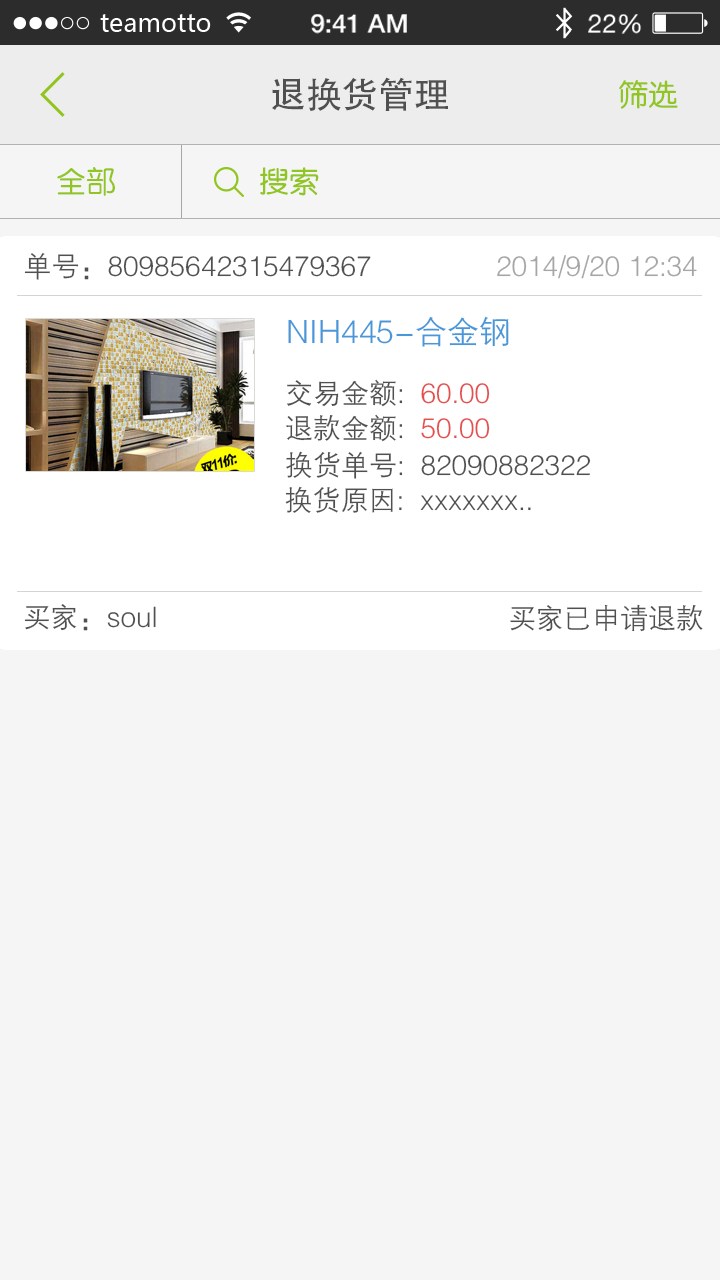
<style>
.page{position:relative;width:720px;height:1280px;background:#f5f5f5}
.page>*{position:absolute;margin:0}
.t1{font:36px "AdobeHeitiStd-Regular";color:#505050}
.t2{font:30px "FZY3JW--GB1-0";color:#91c521}
.t3{font:28px "FZZDXJW--GB1-0";color:#505050}
.t4{font:28px "FZZDXJW--GB1-0";color:#a6a6a6}
.t5{font:32px "FZZDXJW--GB1-0";color:#4997d9}
.t6{font:28px "FZZDXJW--GB1-0";color:#e54f4f}
</style>
<div class="page">
<p class="t1" style="left:272px;top:77px;width:176px;height:34px">退换货管理</p>
<p class="t2" style="left:619px;top:80px;width:59px;height:29px">筛选</p>
<p class="t2" style="left:57px;top:167px;width:58px;height:29px">全部</p>
<p class="t2" style="left:260px;top:167px;width:59px;height:29px">搜索</p>
<p class="t3" style="left:24px;top:252px;width:673px;height:28px">单号：80985642315479367                <span class="t4">2014/9/20 12:34</span></p>
<p class="t5" style="left:288px;top:316px;width:221px;height:31px">NIH445-合金钢</p>
<p class="t3" style="left:286px;top:379px;width:204px;height:28px">交易金额:  <span class="t6">60.00</span></p>
<p class="t3" style="left:286px;top:414px;width:204px;height:28px">退款金额:  <span class="t6">50.00</span></p>
<p class="t3" style="left:286px;top:451px;width:305px;height:28px">换货单号:  82090882322</p>
<p class="t3" style="left:285px;top:486px;width:246px;height:27px">换货原因:  xxxxxxx..</p>
<p class="t3" style="left:24px;top:604px;width:132px;height:27px">买家：soul</p>
<p class="t3" style="left:510px;top:604px;width:193px;height:28px">买家已申请退款</p>
</div>
